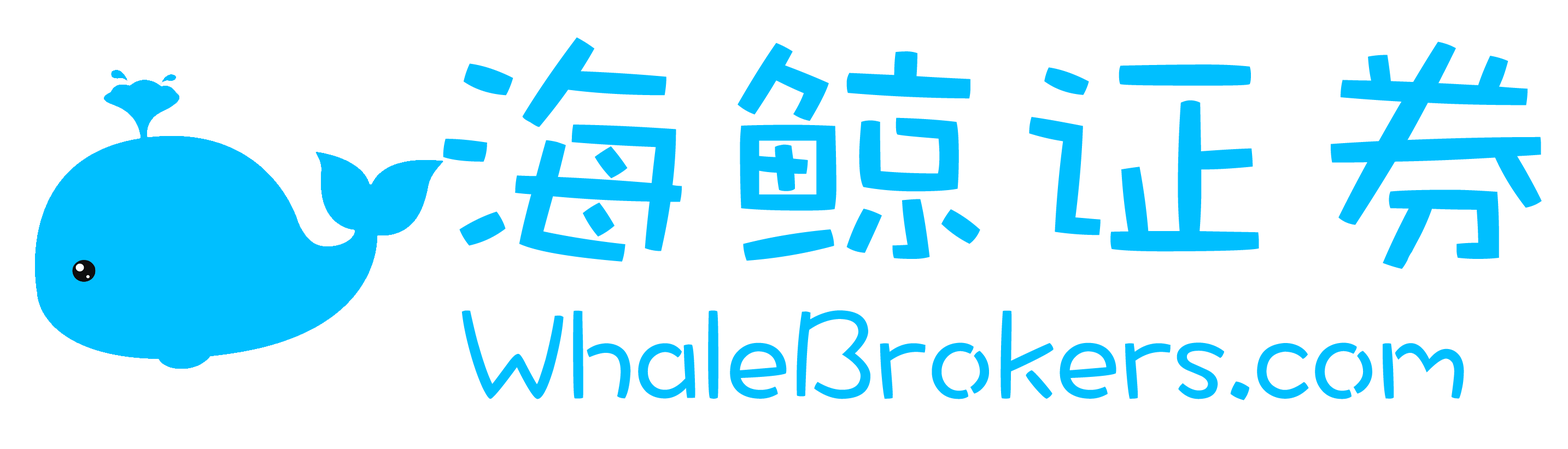
<style>
.page{position:relative;width:1568px;height:449px;background:#ffffff}
.page>*{position:absolute;margin:0}
.t1{font:131.2px "DFWaWaSC-W5";color:#00bfff}
.t2{font:291.5px "DFWaWaSC-W5";color:#00bfff}
</style>
<div class="page">
<p class="t1" style="left:443px;top:37px;width:1099px;height:364px"><span class="t2">海鲸证券<br></span> WhaleBrokers.com</p>
</div>
